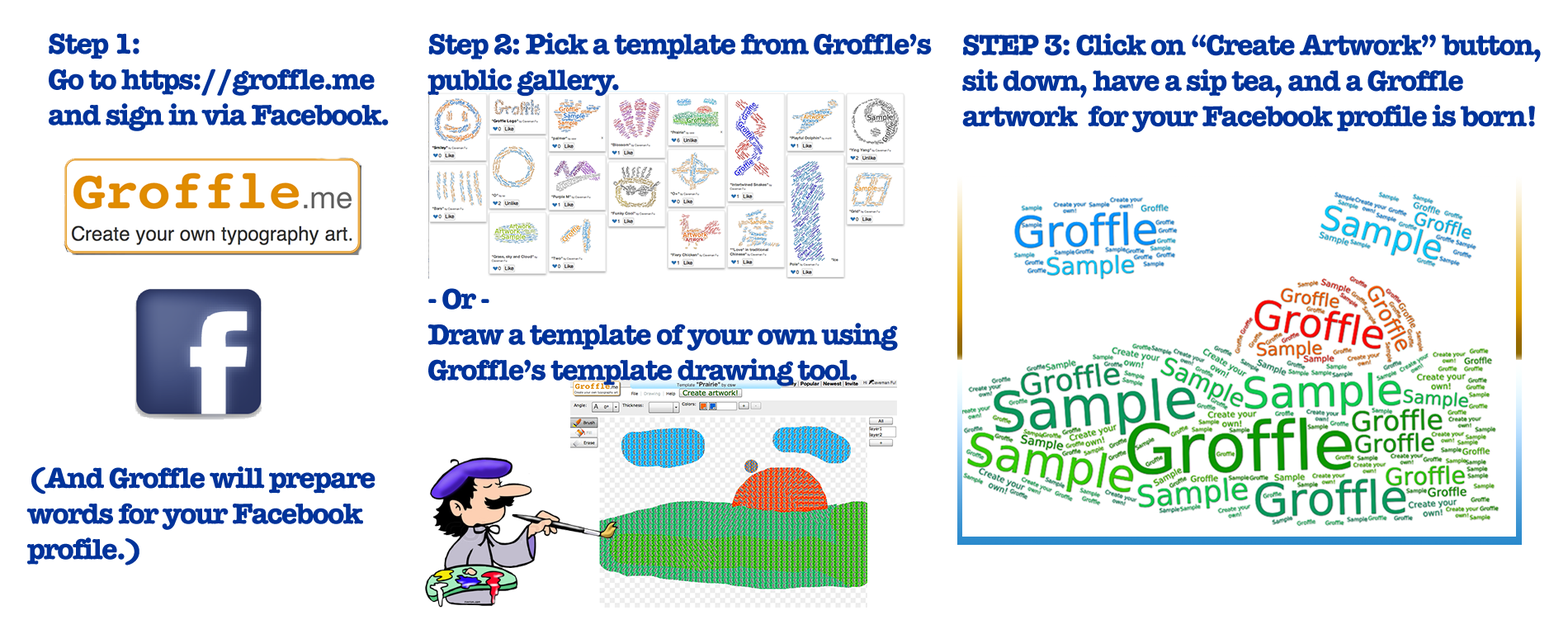
<style>
.page{position:relative;width:1568px;height:634px;background:#ffffff}
.page>*{position:absolute;margin:0}
.t1{font:29.7px "AmericanTypewriter-Bold";letter-spacing:-0.05em;color:#00339a}
</style>
<div class="page">
<p class="t1" style="left:49px;top:33px;width:340px;height:98px">Step 1: <br>Go to https://groffle.me<br>and sign in via Facebook.</p>
<p class="t1" style="left:427px;top:32px;width:505px;height:65px">Step 2: Pick a template from Groffle’s<br>public gallery.</p>
<p class="t1" style="left:962px;top:33px;width:579px;height:100px">STEP 3: Click on “Create Artwork” button,<br>sit down, have a sip tea, and a Groffle<br>artwork  for your Facebook profile is born!</p>
<p class="t1" style="left:427px;top:288px;width:471px;height:98px">- Or -<br>Draw a template of your own using<br>Groffle’s template drawing tool.</p>
<p class="t1" style="left:26px;top:466px;width:349px;height:99px">(And Groffle will prepare <br>words for your Facebook<br>profile.)</p>
</div>
